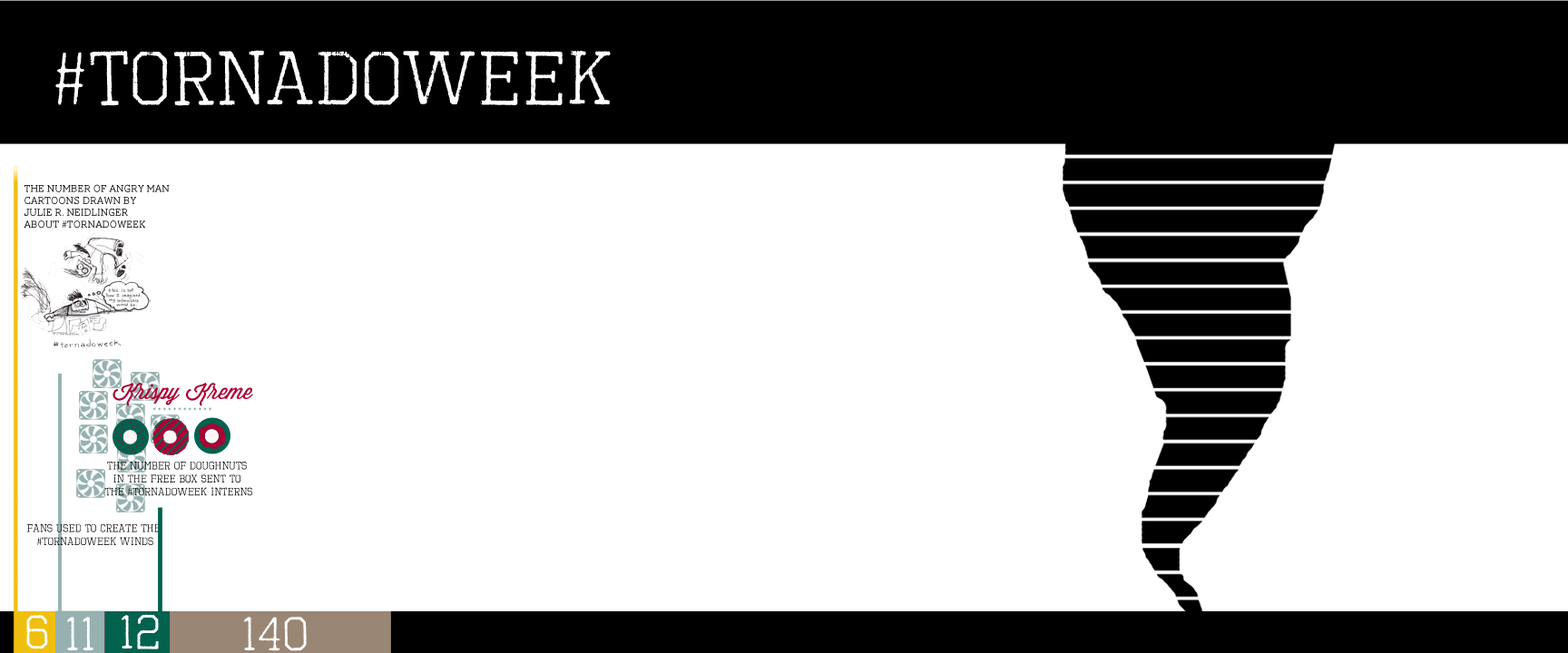
<style>
.page{position:relative;width:1568px;height:653px;background:#ffffff}
.page>*{position:absolute;margin:0}
.t1{font:76.8px "OctinVintageFree";color:#ffffff}
.t2{font:10px "AWConquerorSlab-Light";color:#000000}
.t3{font:21.8px "WisdomScriptAI";color:#ad0134}
.t4{font:10.9px "OctinVintageFree";color:#000000}
.t5{font:48.7px "OctinVintageFree";color:#ffffff}
</style>
<div class="page">
<p class="t1" style="left:55px;top:50px;width:556px;height:56px">#tornadoweek</p>
<p class="t2" style="left:24px;top:184px;width:146px;height:45px">the number of Angry Man <br>cartoons drawn by<br>Julie R. Neidlinger <br>about #tornadoweek</p>
<p class="t3" style="left:113px;top:382px;width:140px;height:25px">Krispy Kreme</p>
<p class="t4" style="left:104px;top:462px;width:148px;height:34px;text-align:center">the number of doughnuts <br>in the free box sent to <br>the #TornadoWeek interns</p>
<p class="t4" style="left:27px;top:524px;width:134px;height:21px;text-align:center">fans used to create the <br>#TornadoWeek winds</p>
<p class="t5" style="left:26px;top:615px;width:22px;height:35px">6</p>
<p class="t5" style="left:67px;top:617px;width:26px;height:35px">11</p>
<p class="t5" style="left:122px;top:614px;width:37px;height:36px">12</p>
<p class="t5" style="left:244px;top:617px;width:63px;height:35px">140</p>
</div>
